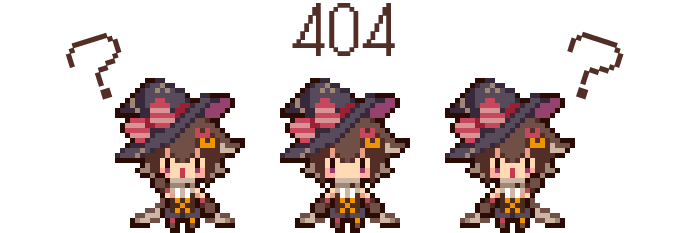
<style>
.page{position:relative;width:690px;height:233px;background:#ffffff}
.page>*{position:absolute;margin:0}
.t1{font:65px "DotGothic16-Regular";letter-spacing:0.04em;color:#522e27}
.t2{font:71.9px "DotGothic16-Regular";color:#522e27}
.t3{font:72.5px "DotGothic16-Regular";color:#522e27}
</style>
<div class="page">
<p class="t1" style="left:292px;top:3px;width:103px;height:53px">404</p>
<p class="t2" style="left:65px;top:32px;width:57px;height:68px;rotate:-17deg">？</p>
<p class="t3" style="left:567px;top:31px;width:57px;height:69px;rotate:18deg">？</p>
</div>
